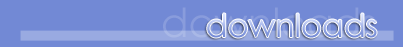
<style>
.page{position:relative;width:403px;height:47px;background:#7289d5}
.page>*{position:absolute;margin:0}
.t1{font:32px "CenturyGothic"}
</style>
<div class="page">
<p class="t1" style="left:207px;top:13px;width:170px;height:25px">downloads</p>
</div>
